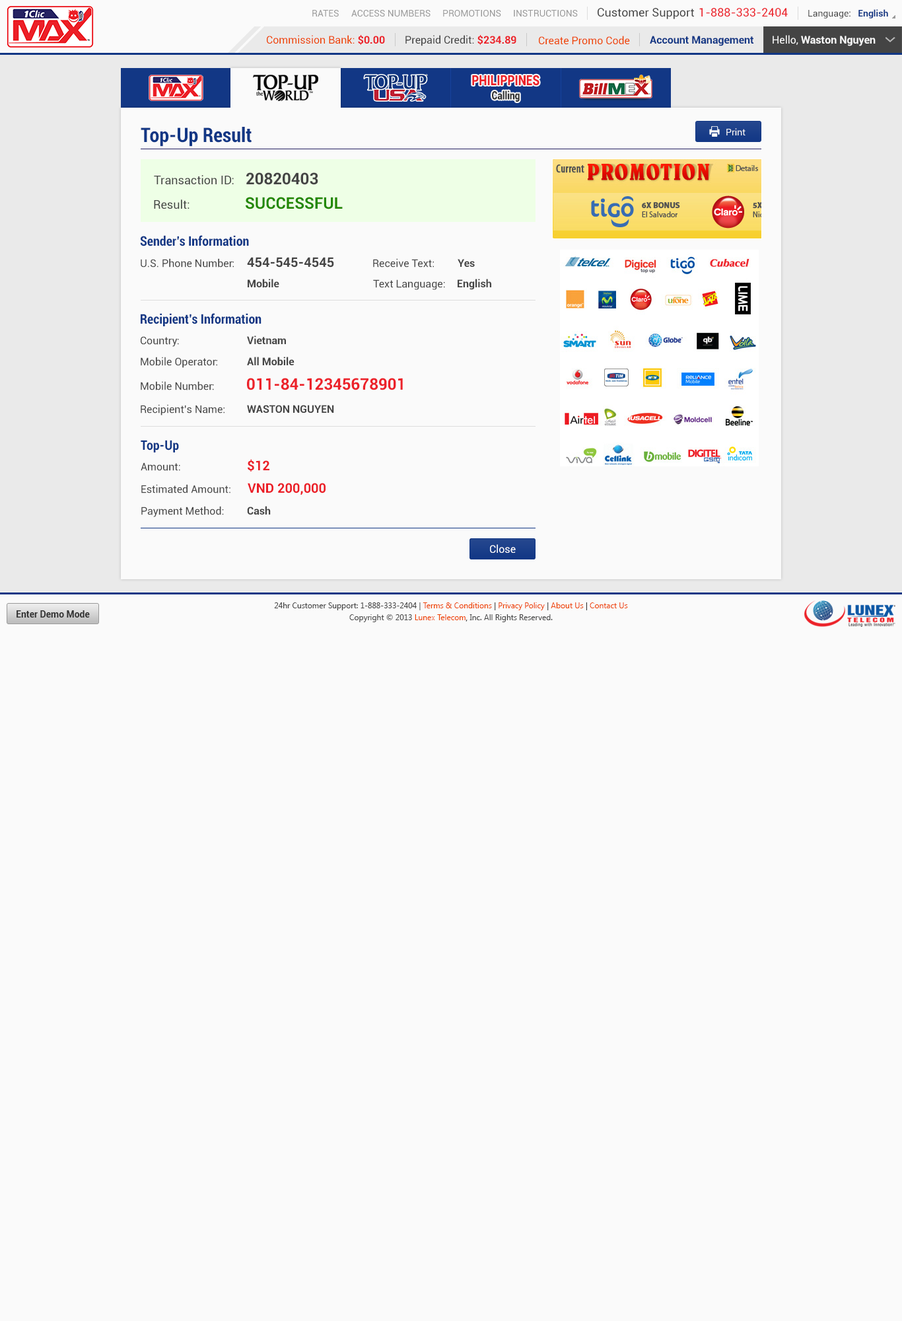
<style>
.page{position:relative;width:902px;height:1321px;background:#fafafa}
.page>*{position:absolute;margin:0}
.t1{font:9.2px "Roboto-Regular";color:#999999}
.t2{font:11.6px "Roboto-Regular";color:#444444}
.t3{font:11.6px "Roboto-Regular";color:#ec2029}
.t4{font:9.2px "Roboto-Regular";color:#444444}
.t5{font:9.2px "Roboto-Bold";color:#123785}
.t6{font:10.6px "Roboto-Regular";color:#ee4400}
.t7{font:10.6px "Roboto-Bold";color:#ec2028}
.t8{font:10.6px "Roboto-Regular";color:#444444}
.t9{font:10.6px "Roboto-Bold";color:#123785}
.t10{font:10.6px "Roboto-Bold";color:#fafafa}
.t11{font:10.6px "Roboto-Regular";color:#fafafa}
.t12{font:14.1px "Roboto-Black";color:#ec2028;scale:0.81 1}
.t13{font:11.3px "Roboto-Black";color:#333333;scale:0.81 1}
.t14{font:19.8px "Roboto-BoldCondensed";color:#123785}
.t15{font:9.2px "Roboto-Regular";color:#fafafa}
.t16{font:15.9px "Roboto-Bold";color:#444444}
.t17{font:11.9px "Roboto-Regular";color:#444444}
.t18{font:15.9px "Roboto-Bold";color:#228800}
.t19{font:13.2px "Roboto-BoldCondensed";color:#123785}
.t20{font:13.2px "Roboto-Bold";color:#444444}
.t21{font:10.6px "Roboto-Bold";color:#444444}
.t22{font:15.9px "Roboto-Bold";color:#ec222a}
.t23{font:13.2px "Roboto-Bold";color:#eb1e27}
.t24{font:10.6px "Roboto-Regular";color:#ffffff}
.t25{font:7.9px/11.9px "SegoeUI";color:#444444}
.t26{font:7.9px/11.9px "SegoeUI";color:#ee4400}
.t27{font:7.9px/11.9px "SegoeUI";color:#333333}
.t28{font:9.2px "Roboto-Bold";color:#333333}
</style>
<div class="page">
<p class="t1" style="left:312px;top:10px;width:27px;height:7px">RATES</p>
<p class="t1" style="left:351px;top:10px;width:80px;height:7px">ACCESS NUMBERS</p>
<p class="t1" style="left:443px;top:10px;width:58px;height:7px">PROMOTIONS</p>
<p class="t1" style="left:514px;top:10px;width:64px;height:7px">INSTRUCTIONS</p>
<p class="t2" style="left:598px;top:8px;width:96px;height:11px">Customer Support</p>
<p class="t3" style="left:700px;top:8px;width:88px;height:9px">1-888-333-2404</p>
<p class="t4" style="left:809px;top:9px;width:80px;height:9px">Language:   <span class="t5">English</span></p>
<p class="t6" style="left:267px;top:35px;width:118px;height:10px">Commission Bank: <span class="t7">$0.00</span></p>
<p class="t8" style="left:406px;top:35px;width:111px;height:11px">Prepaid Credit: <span class="t7">$234.89</span></p>
<p class="t6" style="left:539px;top:36px;width:91px;height:9px">Create Promo Code</p>
<p class="t9" style="left:650px;top:36px;width:104px;height:10px">Account Management</p>
<p class="t10" style="left:773px;top:35px;width:103px;height:11px"><span class="t11">Hello, </span>Waston Nguyen</p>
<p class="t12" style="left:472px;top:75px;width:68px;height:11px">PHILIPPINES</p>
<p class="t13" style="left:492px;top:91px;width:28px;height:11px">Calling</p>
<p class="t14" style="left:141px;top:127px;width:111px;height:20px">Top-Up Result</p>
<p class="t15" style="left:727px;top:128px;width:19px;height:7px">Print</p>
<p class="t16" style="left:246px;top:172px;width:72px;height:13px">20820403</p>
<p class="t17" style="left:154px;top:175px;width:80px;height:10px">Transaction ID:</p>
<p class="t18" style="left:246px;top:197px;width:97px;height:12px">SUCCESSFUL</p>
<p class="t17" style="left:154px;top:200px;width:36px;height:9px">Result:</p>
<p class="t19" style="left:140px;top:235px;width:109px;height:11px">Sender’s Information</p>
<p class="t20" style="left:247px;top:257px;width:87px;height:11px">454-545-4545</p>
<p class="t8" style="left:141px;top:258px;width:93px;height:10px">U.S. Phone Number:</p>
<p class="t8" style="left:373px;top:258px;width:61px;height:10px">Receive Text:</p>
<p class="t21" style="left:458px;top:259px;width:17px;height:8px">Yes</p>
<p class="t21" style="left:248px;top:279px;width:31px;height:9px">Mobile</p>
<p class="t8" style="left:373px;top:279px;width:72px;height:11px">Text Language:</p>
<p class="t21" style="left:458px;top:279px;width:34px;height:11px">English</p>
<p class="t19" style="left:141px;top:313px;width:121px;height:13px">Recipient’s Information</p>
<p class="t8" style="left:141px;top:336px;width:38px;height:11px">Country:</p>
<p class="t21" style="left:247px;top:336px;width:39px;height:9px">Vietnam</p>
<p class="t8" style="left:141px;top:357px;width:76px;height:11px">Mobile Operator:</p>
<p class="t21" style="left:247px;top:357px;width:48px;height:9px">All Mobile</p>
<p class="t22" style="left:247px;top:378px;width:156px;height:12px">011-84-12345678901</p>
<p class="t8" style="left:141px;top:381px;width:73px;height:9px">Mobile Number:</p>
<p class="t8" style="left:141px;top:404px;width:84px;height:12px">Recipient’s Name:</p>
<p class="t21" style="left:247px;top:405px;width:87px;height:8px">WASTON NGUYEN</p>
<p class="t19" style="left:141px;top:440px;width:38px;height:13px">Top-Up</p>
<p class="t23" style="left:248px;top:459px;width:22px;height:13px">$12</p>
<p class="t8" style="left:141px;top:462px;width:39px;height:9px">Amount:</p>
<p class="t8" style="left:141px;top:484px;width:90px;height:10px">Estimated Amount:</p>
<p class="t23" style="left:248px;top:483px;width:78px;height:12px">VND 200,000</p>
<p class="t8" style="left:141px;top:506px;width:83px;height:11px">Payment Method:</p>
<p class="t21" style="left:247px;top:506px;width:24px;height:9px">Cash</p>
<p class="t24" style="left:490px;top:544px;width:26px;height:9px">Close</p>
<p class="t25" style="left:274px;top:603px;width:354px;height:19px;text-align:center">24hr Customer Support: 1-888-333-2404 | <span class="t26">Terms &amp; Conditions</span><span class="t27"> | </span><span class="t26">Privacy Policy</span><span class="t27"> | </span><span class="t26">About Us</span><span class="t27"> | </span><span class="t26">Contact Us<br></span>Copyright © 2013 <span class="t26">Lunex Telecom</span><span class="t27">,</span> Inc. All Rights Reserved.</p>
<p class="t28" style="left:17px;top:610px;width:73px;height:8px">Enter Demo Mode</p>
</div>
